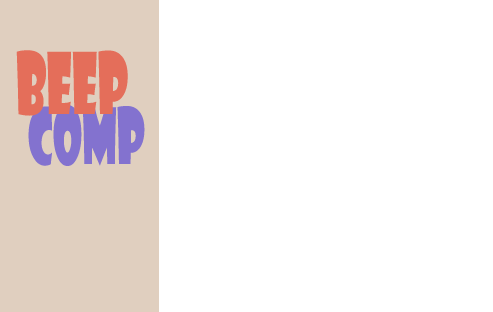
<style>
.page{position:relative;width:493px;height:312px;background:#ffffff}
.page>*{position:absolute;margin:0}
.t1{font:82.8px "ShowcardGothic-Reg";color:#e46e5a;scale:0.56 1}
.t2{font:75.6px "ShowcardGothic-Reg";color:#8372cf;scale:0.56 1}
</style>
<div class="page">
<p class="t1" style="left:16px;top:50px;width:112px;height:66px">BEEP</p>
<p class="t2" style="left:28px;top:105px;width:117px;height:61px">COMP</p>
</div>
